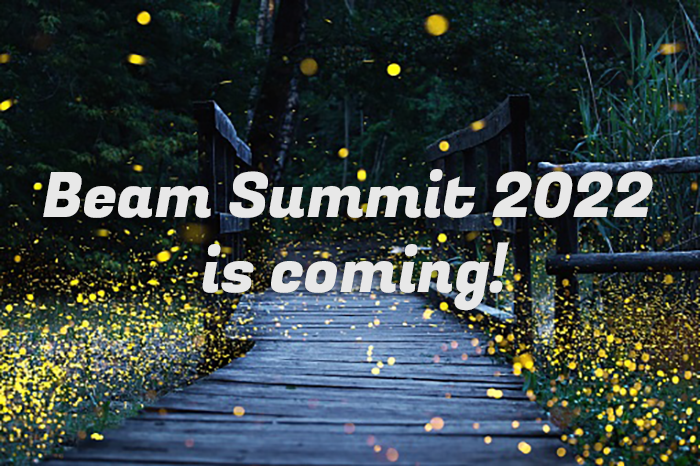
<style>
.page{position:relative;width:700px;height:466px}
.page>*{position:absolute;margin:0}
.t1{font:62.5px "FugazOne-Regular";color:#e8e8e8}
</style>
<div class="page">
<p class="t1" style="left:43px;top:169px;width:610px;height:142px;text-align:center">Beam Summit 2022 <br>is coming!</p>
</div>
